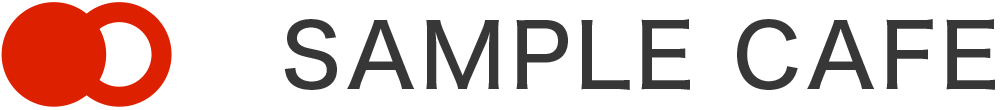
<style>
.page{position:relative;width:1000px;height:110px;background:#ffffff}
.page>*{position:absolute;margin:0}
.t1{font:88.5px "HiraginoSans-W5";letter-spacing:0.05em;color:#373737}
</style>
<div class="page">
<p class="t1" style="left:284px;top:19px;width:711px;height:71px">SAMPLE CAFE</p>
</div>
